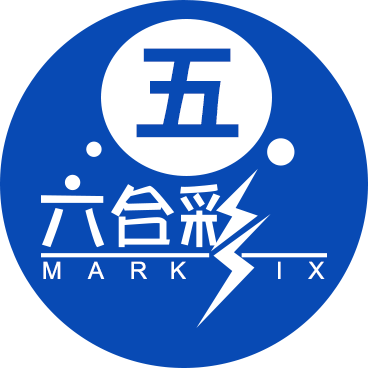
<style>
.page{position:relative;width:368px;height:368px;background:#084ab4}
.page>*{position:absolute;margin:0}
.t1{font:110px "CloudHeiChaoCuGBK";letter-spacing:-0.05em;color:#084ab4}
.t2{font:23.8px "ArialMT";letter-spacing:-0.05em;color:#ffffff}
</style>
<div class="page">
<p class="t1" style="left:136px;top:48px;width:103px;height:90px">五</p>
<p class="t2" style="left:43px;top:261px;width:18px;height:18px">M</p>
<p class="t2" style="left:87px;top:261px;width:18px;height:18px">A</p>
<p class="t2" style="left:131px;top:261px;width:16px;height:18px">R</p>
<p class="t2" style="left:171px;top:261px;width:15px;height:18px">K</p>
<p class="t2" style="left:278px;top:261px;width:3px;height:18px">I</p>
<p class="t2" style="left:308px;top:261px;width:17px;height:18px">X</p>
</div>
